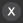
<style>
.page{position:relative;width:23px;height:23px;background:#333333}
.page>*{position:absolute;margin:0}
.t1{font:11px "ArialMT";color:#ffffff}
</style>
<div class="page">
<p class="t1" style="left:7px;top:7px;width:9px;height:9px">X</p>
</div>
